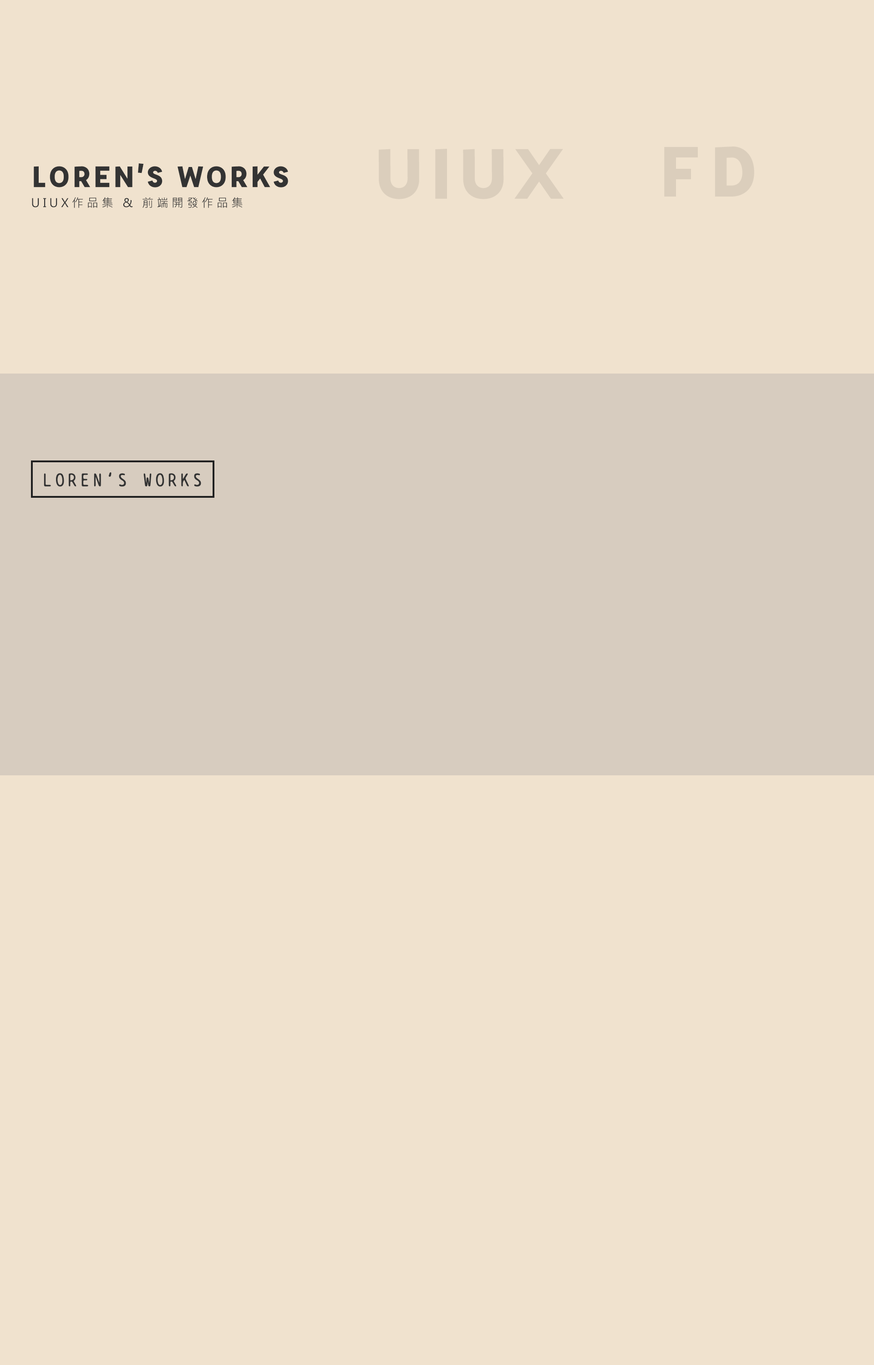
<style>
.page{position:relative;width:874px;height:1365px;background:#f0e2ce}
.page>*{position:absolute;margin:0}
.t1{font:77.8px "Affogato-Bold";letter-spacing:0.05em;color:#dbcebc;scale:1.05 1}
.t2{font:77.8px "Affogato-Bold";letter-spacing:0.12em;color:#dbcebc;scale:1.05 1}
.t3{font:11.8px/20px "MicrosoftJhengHeiRegular";letter-spacing:0.26em;color:#333333}
.t4{font:32.4px "Affogato-Bold";letter-spacing:0.04em;color:#333333;scale:1.05 1}
.t5{font:18.2px "BPtypewrite";letter-spacing:0.06em;color:#333333;font-weight:bold}
</style>
<div class="page">
<p class="t1" style="left:379px;top:149px;width:184px;height:50px">UIUX</p>
<p class="t2" style="left:664px;top:147px;width:90px;height:50px">FD</p>
<p class="t3" style="left:32px;top:163px;width:256px;height:45px"><span class="t4">LOREN’S WORKS<br></span>UIUX作品集 &amp; 前端開發作品集</p>
<p class="t5" style="left:44px;top:472px;width:157px;height:15px">LOREN’S WORKS</p>
</div>
